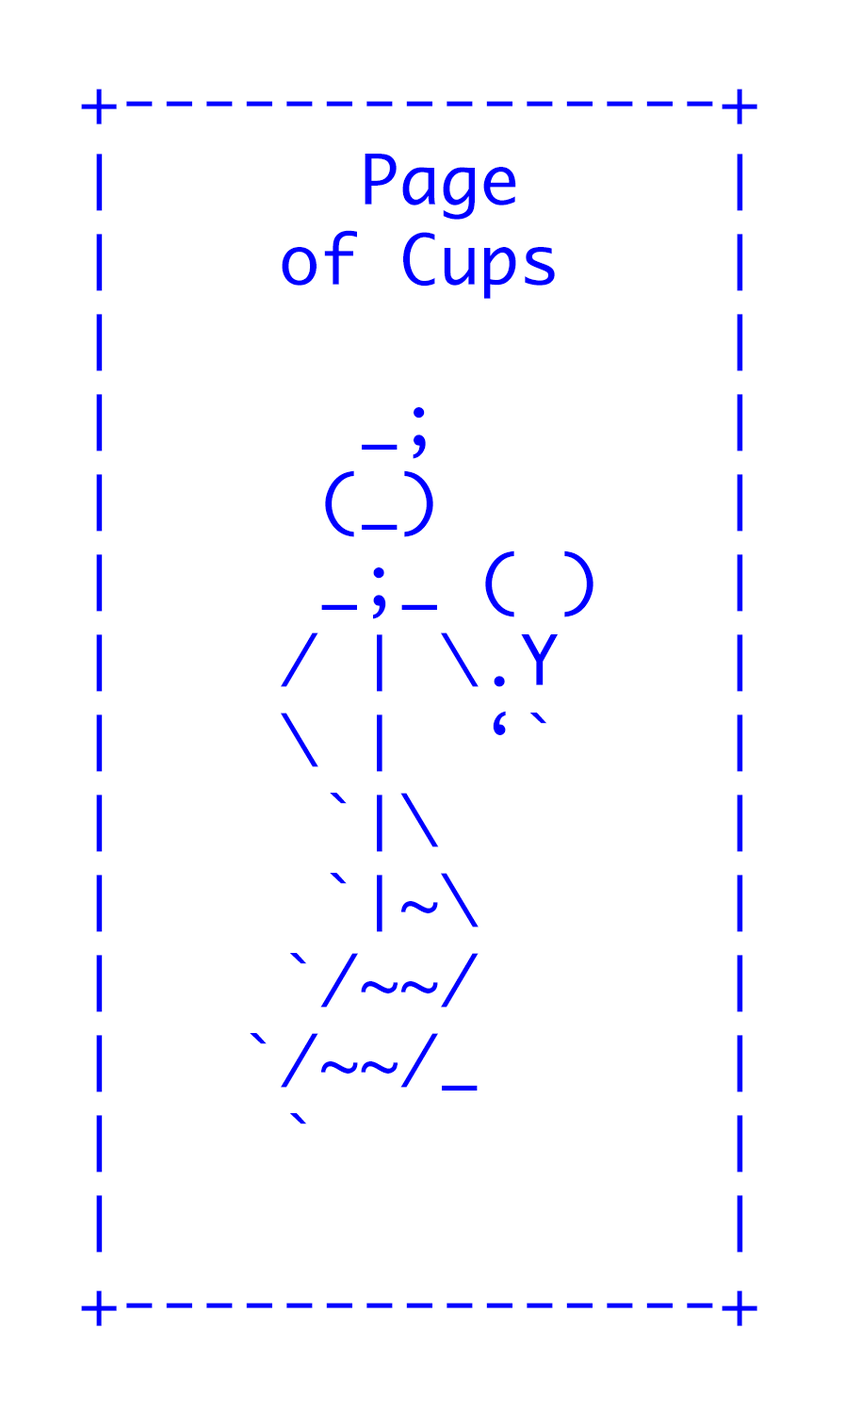
<style>
.page{position:relative;width:845px;height:1411px;background:#ffffff}
.page>*{position:absolute;margin:0}
.t1{font:66.7px "Monaco";color:#0000ff}
</style>
<div class="page">
<p class="t1" style="left:81px;top:89px;width:677px;height:1237px">+---------------+<br>│      Page     │<br>│    of Cups    │<br>│               │<br>│      _;       │<br>│     (_)       │<br>│     _;_ ( )   │<br>│    / │ \.Y    │ <br>│    \ │  ‘`    │ <br>│     `│\       │<br>│     `│~\      │ <br>│    `/~~/      │ <br>│   `/~~/_      │<br>│    `          │<br>│               │<br>+---------------+</p>
</div>
